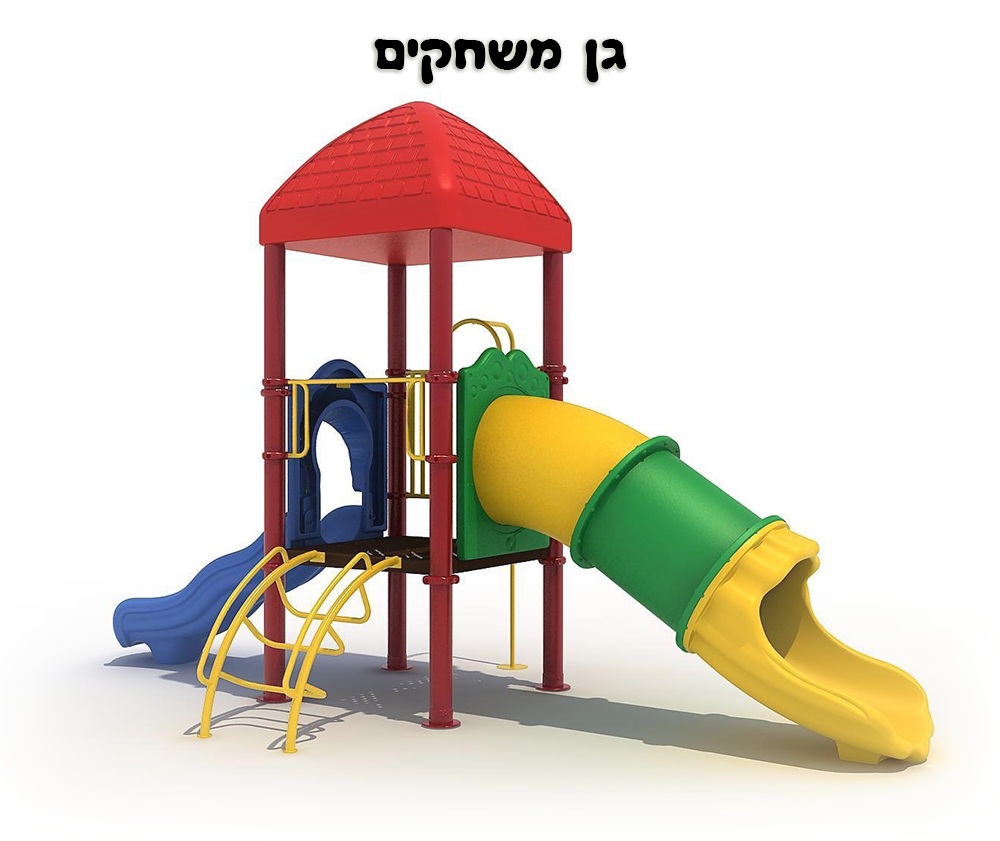
<style>
.page{position:relative;width:1000px;height:841px;background:#ffffff}
.page>*{position:absolute;margin:0}
.t1{font:48px "GanCLM-Bold";color:#000000}
</style>
<div class="page">
<p class="t1" style="left:374px;top:39px;width:252px;height:45px">םיקחשמ ןג</p>
</div>
